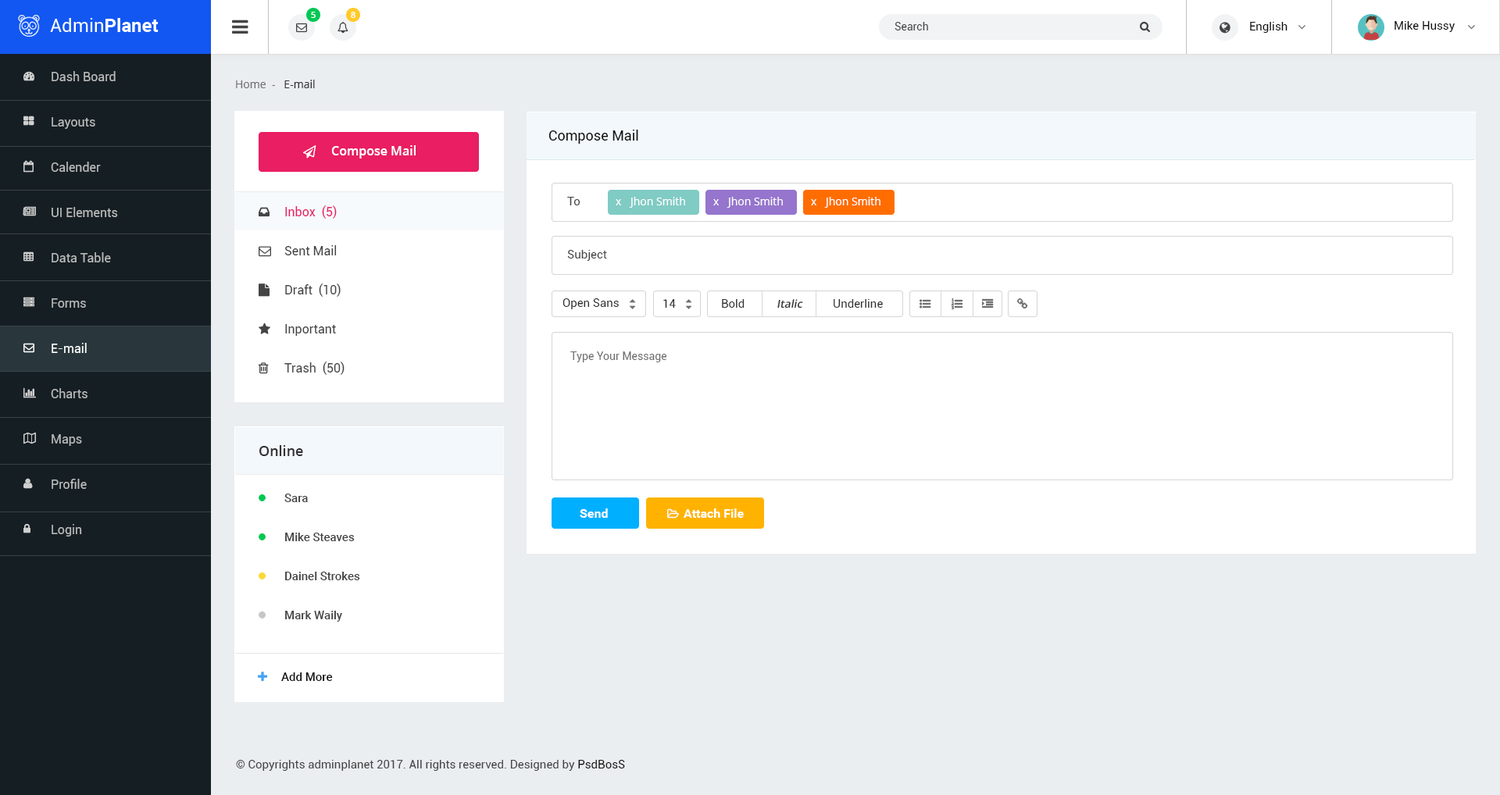
<style>
.page{position:relative;width:1500px;height:795px;background:#ffffff}
.page>*{position:absolute;margin:0}
.t1{font:8.6px "OpenSans-Semibold";color:#ffffff}
.t2{font:10.9px "Roboto-Regular";color:#444444}
.t3{font:11.7px "Roboto-Regular";color:#111111}
.t4{font:12.5px/45.3px "Roboto-Regular";color:#b9b9b9}
.t5{font:12.5px/45.3px "Roboto-Regular";color:#ffffff}
.t6{font:10.9px "OpenSans";color:#707070}
.t7{font:10.9px "OpenSans";color:#333333}
.t8{font:14.1px "Roboto-Regular";color:#111111}
.t9{font:12.5px "OpenSans-Semibold";color:#ffffff}
.t10{font:11.7px "Roboto-Regular";color:#444444}
.t11{font:10.9px "OpenSans";color:#ffffff}
.t12{font:12.5px/39.1px "Roboto-Regular";color:#444444}
.t13{font:12.5px/39.1px "Roboto-Regular";color:#e91e63}
.t14{font:11.7px "Roboto-Regular";color:#333333}
.t15{font:10.9px "OpenSans-Semibold";color:#333333;font-style:italic}
.t16{font:10.9px "Roboto-Regular";color:#707070}
.t17{font:14.1px "OpenSans-Semibold";color:#333333}
.t18{font:11.7px/39.1px "Roboto-Medium";color:#444444}
.t19{font:12.5px "Roboto-Bold";color:#ffffff}
.t20{font:11.7px "Roboto-Medium";color:#111111}
</style>
<div class="page">
<p class="t1" style="left:311px;top:12px;width:5px;height:6px">5</p>
<p class="t1" style="left:351px;top:12px;width:4px;height:6px">8</p>
<p class="t2" style="left:894px;top:22px;width:34px;height:8px">Search</p>
<p class="t3" style="left:1250px;top:22px;width:37px;height:11px">English</p>
<p class="t3" style="left:1394px;top:21px;width:60px;height:11px">Mike Hussy</p>
<p class="t4" style="left:51px;top:71px;width:67px;height:466px">Dash Board<br>Layouts<br>Calender<br>UI Elements<br>Data Table<br>Forms<br><span class="t5">E-mail<br></span>Charts<br>Maps<br>Profile<br>Login</p>
<p class="t6" style="left:236px;top:80px;width:79px;height:8px">Home  -<span class="t7">   E-mail</span></p>
<p class="t8" style="left:548px;top:130px;width:90px;height:14px">Compose Mail</p>
<p class="t9" style="left:331px;top:145px;width:85px;height:14px">Compose Mail</p>
<p class="t10" style="left:567px;top:197px;width:13px;height:8px">To</p>
<p class="t11" style="left:629px;top:197px;width:56px;height:11px">Jhon Smith</p>
<p class="t11" style="left:726px;top:197px;width:57px;height:11px">Jhon Smith</p>
<p class="t11" style="left:824px;top:197px;width:56px;height:11px">Jhon Smith</p>
<p class="t12" style="left:284px;top:205px;width:60px;height:170px"><span class="t13">Inbox  (5)<br></span>Sent Mail<br>Draft  (10)<br>Inportant<br>Trash  (50)</p>
<p class="t11" style="left:615px;top:199px;width:6px;height:6px">x</p>
<p class="t11" style="left:713px;top:199px;width:6px;height:6px">x</p>
<p class="t11" style="left:811px;top:199px;width:5px;height:6px">x</p>
<p class="t10" style="left:567px;top:250px;width:40px;height:11px">Subject</p>
<p class="t14" style="left:562px;top:298px;width:57px;height:11px">Open Sans</p>
<p class="t14" style="left:663px;top:299px;width:13px;height:9px">14</p>
<p class="t14" style="left:722px;top:299px;width:22px;height:9px">Bold</p>
<p class="t15" style="left:777px;top:299px;width:26px;height:10px">Italic</p>
<p class="t14" style="left:833px;top:299px;width:50px;height:9px">Underline</p>
<p class="t16" style="left:570px;top:351px;width:97px;height:11px">Type Your Message</p>
<p class="t17" style="left:259px;top:445px;width:44px;height:11px">Online</p>
<p class="t18" style="left:284px;top:494px;width:76px;height:128px">Sara <br>Mike Steaves<br>Dainel Strokes<br>Mark Waily</p>
<p class="t19" style="left:580px;top:508px;width:28px;height:10px">Send</p>
<p class="t19" style="left:683px;top:508px;width:61px;height:10px">Attach File</p>
<p class="t20" style="left:281px;top:673px;width:52px;height:8px">Add More</p>
<p class="t10" style="left:236px;top:760px;width:389px;height:11px">© Copyrights adminplanet 2017. All rights reserved. Designed by <span class="t3">PsdBosS</span></p>
</div>
